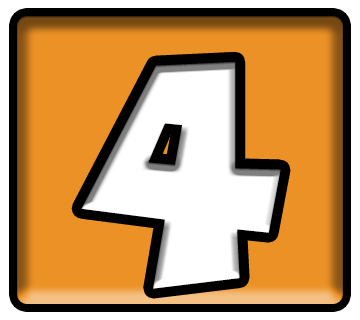
<style>
.page{position:relative;width:360px;height:320px;background:#ec9126}
.page>*{position:absolute;margin:0}
.t1{font:294.4px "Funhouse";color:#ffffff}
</style>
<div class="page">
<p class="t1" style="left:81px;top:61px;width:200px;height:228px">4</p>
</div>
